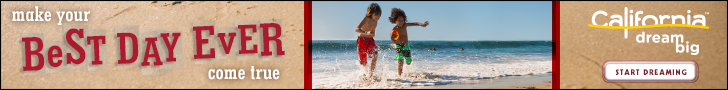
<style>
.page{position:relative;width:728px;height:90px}
.page>*{position:absolute;margin:0}
.t1{font:21.5px "GeometricSlab703BT-BoldCond";letter-spacing:0.015em;color:#ffffff}
.t2{font:47.6px "GeometricSlab703BT-BoldCond";letter-spacing:0.02em;color:#ac1a2f}
.t3{font:49.1px "GeometricSlab703BT-BoldCond";letter-spacing:0.02em;color:#ac1a2f}
.t4{font:47.4px "GeometricSlab703BT-BoldCond";letter-spacing:0.02em;color:#ac1a2f}
.t5{font:50.8px "GeometricSlab703BT-BoldCond";letter-spacing:0.02em;color:#ac1a2f}
.t6{font:42px "GeometricSlab703BT-BoldCond";letter-spacing:0.02em;color:#ac1a2f}
.t7{font:45.4px "GeometricSlab703BT-BoldCond";letter-spacing:0.02em;color:#ac1a2f}
.t8{font:41.2px "GeometricSlab703BT-BoldCond";letter-spacing:0.02em;color:#ac1a2f}
.t9{font:42.4px "GeometricSlab703BT-BoldCond";letter-spacing:0.02em;color:#ac1a2f}
.t10{font:7.8px "Geometric231BT-HeavyC";letter-spacing:0.1em;color:#7a2531}
</style>
<div class="page">
<p class="t1" style="left:12px;top:6px;width:78px;height:19px">make your</p>
<p class="t2" style="left:22px;top:23px;width:263px;height:48px;rotate:-2deg"><span class="t3">B</span><span class="t4">e</span><span class="t5">S</span><span class="t6">T </span><span class="t7">D</span><span class="t8">A</span><span class="t6">Y </span>Ev<span class="t9">E</span>R</p>
<p class="t1" style="left:208px;top:66px;width:72px;height:14px">come true</p>
<p class="t10" style="left:615px;top:69px;width:72px;height:6px">START DREAMING</p>
</div>
